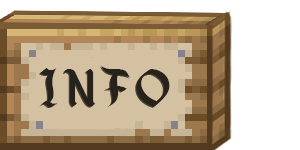
<style>
.page{position:relative;width:300px;height:150px;background:#ffffff}
.page>*{position:absolute;margin:0}
.t1{font:58.4px "EnchantedLand";letter-spacing:0.1em;color:#27221c}
</style>
<div class="page">
<p class="t1" style="left:40px;top:65px;width:130px;height:42px">INFO</p>
</div>
